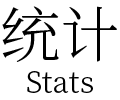
<style>
.page{position:relative;width:120px;height:100px;background:#ffffff}
.page>*{position:absolute;margin:0}
.t1{font:60px "SourceHanSerifCN-Light";color:#000000}
.t2{font:30px "SourceHanSerifCN-Light";color:#000000}
</style>
<div class="page">
<p class="t1" style="left:2px;top:6px;width:115px;height:56px">统计</p>
<p class="t2" style="left:27px;top:71px;width:66px;height:22px">Stats</p>
</div>
